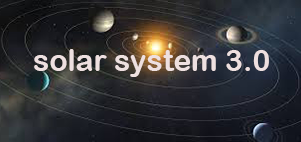
<style>
.page{position:relative;width:301px;height:142px}
.page>*{position:absolute;margin:0}
.t1{font:30px "ArialRoundedMTBold";color:#eee0e0}
</style>
<div class="page">
<p class="t1" style="left:34px;top:49px;width:235px;height:28px">solar system 3.0</p>
</div>
